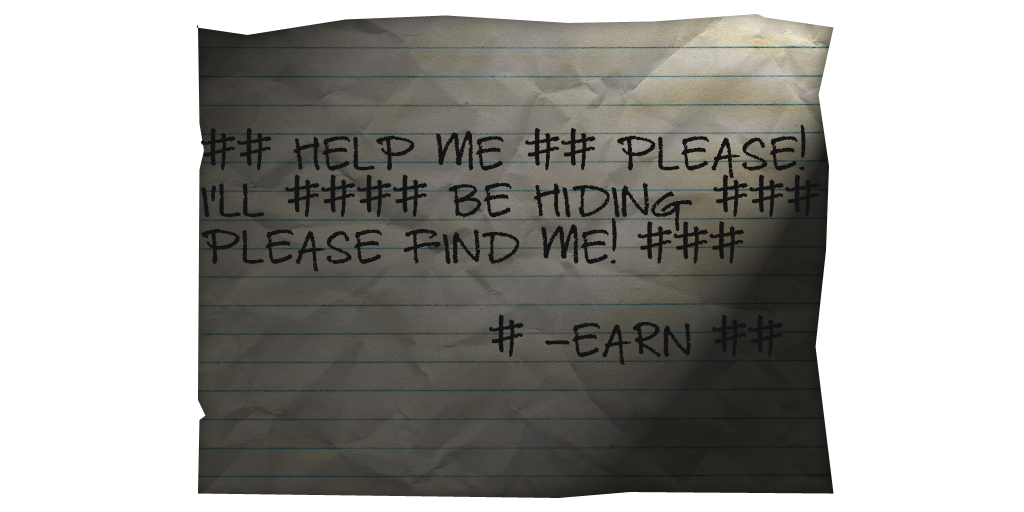
<style>
.page{position:relative;width:1024px;height:512px;background:#ffffff}
.page>*{position:absolute;margin:0}
.t1{font:37.3px/46.7px "ChangeTomorrowToday";color:#131313;font-weight:bold}
</style>
<div class="page">
<p class="t1" style="left:201px;top:124px;width:619px;height:241px">## HELP ME ## PLEASE! <br>I'LL #### BE HIDING ### <br>PLEASE FIND ME! ###<br><br>        # -EARN ##</p>
</div>
